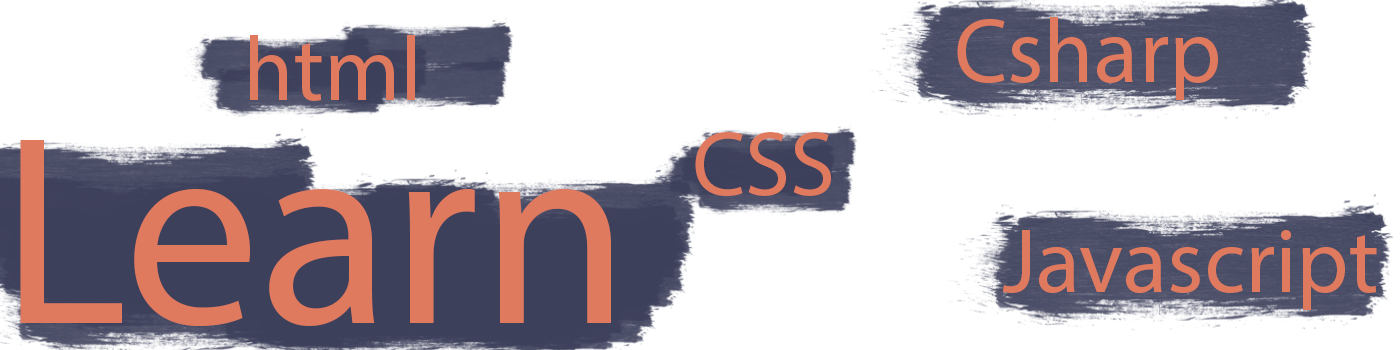
<style>
.page{position:relative;width:1400px;height:350px;background:#ffffff}
.page>*{position:absolute;margin:0}
.t1{font:91.7px "MyriadPro-Regular";color:#e07a5f}
.t2{font:270.8px "MyriadPro-Regular";color:#e07a5f}
</style>
<div class="page">
<p class="t1" style="left:957px;top:17px;width:261px;height:83px">Csharp</p>
<p class="t1" style="left:250px;top:35px;width:165px;height:66px">html</p>
<p class="t1" style="left:695px;top:132px;width:136px;height:64px">CSS</p>
<p class="t2" style="left:20px;top:140px;width:591px;height:187px">Learn</p>
<p class="t1" style="left:1002px;top:230px;width:375px;height:80px">Javascript</p>
</div>
